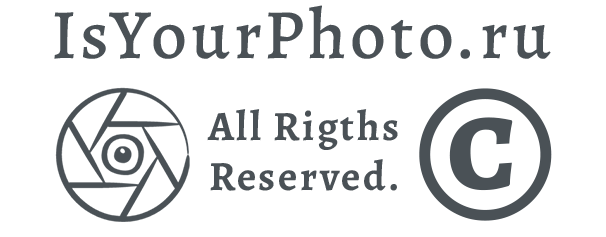
<style>
.page{position:relative;width:606px;height:237px;background:#ffffff}
.page>*{position:absolute;margin:0}
.t1{font:70.8px "AlegreyaRoman-Medium";letter-spacing:0.06em;color:#4a5156}
.t2{font:216.7px "AlegreyaRoman-Bold";letter-spacing:0.06em;color:#4a5156}
.t3{font:41.7px "AlegreyaRoman-Bold";letter-spacing:0.06em;color:#4a5156}
</style>
<div class="page">
<p class="t1" style="left:54px;top:5px;width:497px;height:54px">IsYourPhoto.ru</p>
<p class="t2" style="left:419px;top:88px;width:133px;height:133px">©</p>
<p class="t3" style="left:207px;top:109px;width:191px;height:82px;text-align:center">All Rigths<br>Reserved.</p>
</div>
